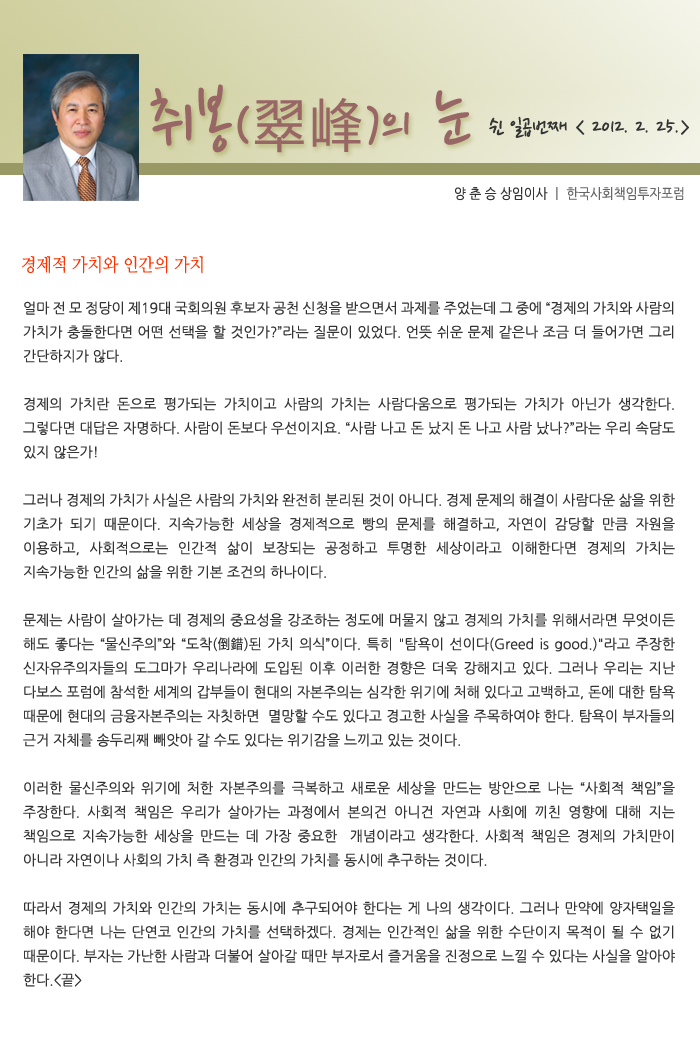
<style>
.page{position:relative;width:700px;height:1061px;background:#ffffff}
.page>*{position:absolute;margin:0}
.t1{font:77.5px "NanumPen";color:#996666}
.t2{font:60px "NanumPen";color:#996666}
.t3{font:60px "NanumGothic";color:#996666}
.t4{font:24px "NanumPen";color:#333333}
.t5{font:14px "NanumGothic";color:#666666;scale:0.9 1}
.t6{font:14px "NanumGothic";color:#333333;scale:0.9 1}
.t7{font:18px "NanumMyeongjo";color:#ff3300;scale:0.9 1}
.t8{font:14px/24px "NanumGothic";color:#333333}
</style>
<div class="page">
<p class="t1" style="left:150px;top:84px;width:321px;height:69px">취봉<span class="t2">(</span><span class="t3">翠峰</span><span class="t2">)</span><span class="t2">의</span> 눈</p>
<p class="t4" style="left:489px;top:116px;width:200px;height:22px">쉰 일곱번째 &lt; 2012. 2. 25.&gt;</p>
<p class="t5" style="left:455px;top:187px;width:229px;height:14px"><span class="t6">양 춘 승 상임이사 </span>ㅣ 한국사회책임투자포럼</p>
<p class="t7" style="left:22px;top:256px;width:181px;height:18px">경제적 가치와 인간의 가치</p>
<p class="t8" style="left:23px;top:301px;width:652px;height:686px;text-align:justify">얼마 전 모 정당이 제19대 국회의원 후보자 공천 신청을 받으면서 과제를 주었는데 그 중에 “경제의 가치와 사람의 가치가 충돌한다면 어떤 선택을 할 것인가?”라는 질문이 있었다. 언뜻 쉬운 문제 같은나 조금 더 들어가면 그리 간단하지가 않다.<br><br>경제의 가치란 돈으로 평가되는 가치이고 사람의 가치는 사람다움으로 평가되는 가치가 아닌가 생각한다. 그렇다면 대답은 자명하다. 사람이 돈보다 우선이지요. “사람 나고 돈 났지 돈 나고 사람 났나?”라는 우리 속담도 있지 않은가!<br><br>그러나 경제의 가치가 사실은 사람의 가치와 완전히 분리된 것이 아니다. 경제 문제의 해결이 사람다운 삶을 위한 기초가 되기 때문이다. 지속가능한 세상을 경제적으로 빵의 문제를 해결하고, 자연이 감당할 만큼 자원을 이용하고, 사회적으로는 인간적 삶이 보장되는 공정하고 투명한 세상이라고 이해한다면 경제의 가치는 지속가능한 인간의 삶을 위한 기본 조건의 하나이다.<br><br>문제는 사람이 살아가는 데 경제의 중요성을 강조하는 정도에 머물지 않고 경제의 가치를 위해서라면 무엇이든 해도 좋다는 “물신주의”와 “도착(倒錯)된 가치 의식”이다. 특히 "탐욕이 선이다(Greed is good.)"라고 주장한 신자유주의자들의 도그마가 우리나라에 도입된 이후 이러한 경향은 더욱 강해지고 있다. 그러나 우리는 지난 다보스 포럼에 참석한 세계의 갑부들이 현대의 자본주의는 심각한 위기에 처해 있다고 고백하고, 돈에 대한 탐욕 때문에 현대의 금융자본주의는 자칫하면  멸망할 수도 있다고 경고한 사실을 주목하여야 한다. 탐욕이 부자들의 근거 자체를 송두리째 빼앗아 갈 수도 있다는 위기감을 느끼고 있는 것이다.<br><br>이러한 물신주의와 위기에 처한 자본주의를 극복하고 새로운 세상을 만드는 방안으로 나는 “사회적 책임”을 주장한다. 사회적 책임은 우리가 살아가는 과정에서 본의건 아니건 자연과 사회에 끼친 영향에 대해 지는 책임으로 지속가능한 세상을 만드는 데 가장 중요한  개념이라고 생각한다. 사회적 책임은 경제의 가치만이 아니라 자연이나 사회의 가치 즉 환경과 인간의 가치를 동시에 추구하는 것이다. <br><br>따라서 경제의 가치와 인간의 가치는 동시에 추구되어야 한다는 게 나의 생각이다. 그러나 만약에 양자택일을 해야 한다면 나는 단연코 인간의 가치를 선택하겠다. 경제는 인간적인 삶을 위한 수단이지 목적이 될 수 없기 때문이다. 부자는 가난한 사람과 더불어 살아갈 때만 부자로서 즐거움을 진정으로 느낄 수 있다는 사실을 알아야 한다.&lt;끝&gt;</p>
</div>
